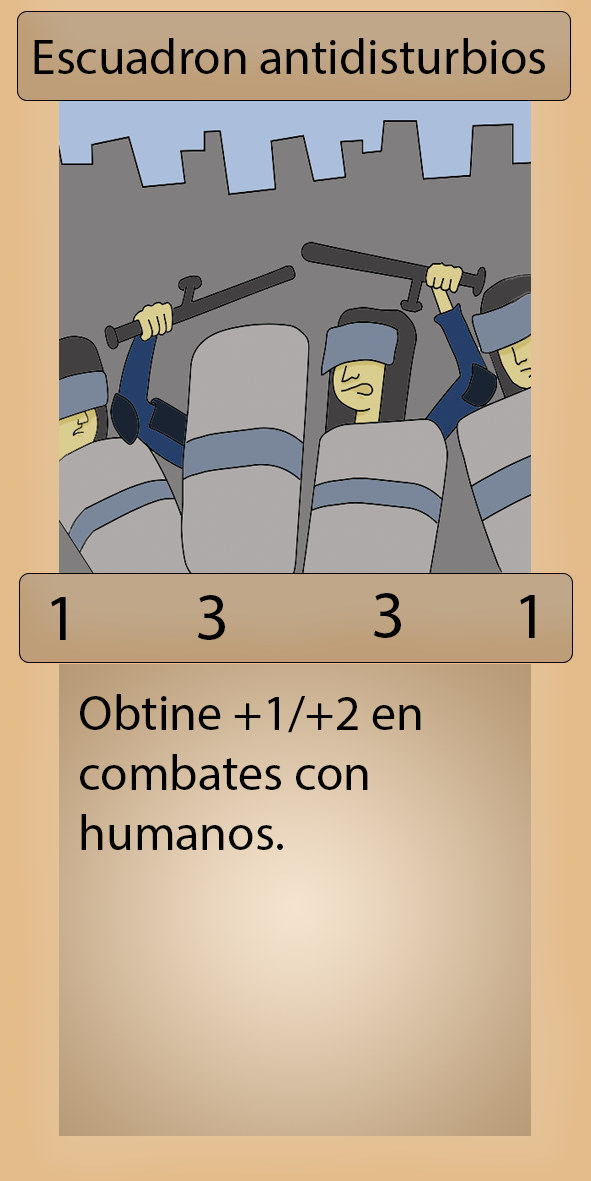
<style>
.page{position:relative;width:591px;height:1181px}
.page>*{position:absolute;margin:0}
.t1{font:50px "MyriadPro-Regular";color:#000000}
.t2{font:66.7px "MyriadPro-Regular";color:#000000}
</style>
<div class="page">
<p class="t1" style="left:34px;top:38px;width:511px;height:36px">Escuadron antidisturbios</p>
<p class="t2" style="left:373px;top:593px;width:28px;height:45px">3</p>
<p class="t2" style="left:51px;top:597px;width:15px;height:43px">1</p>
<p class="t2" style="left:197px;top:595px;width:28px;height:45px">3</p>
<p class="t2" style="left:520px;top:595px;width:15px;height:43px">1</p>
<p class="t1" style="left:80px;top:694px;width:341px;height:156px">Obtine +1/+2 en combates con humanos.</p>
</div>
